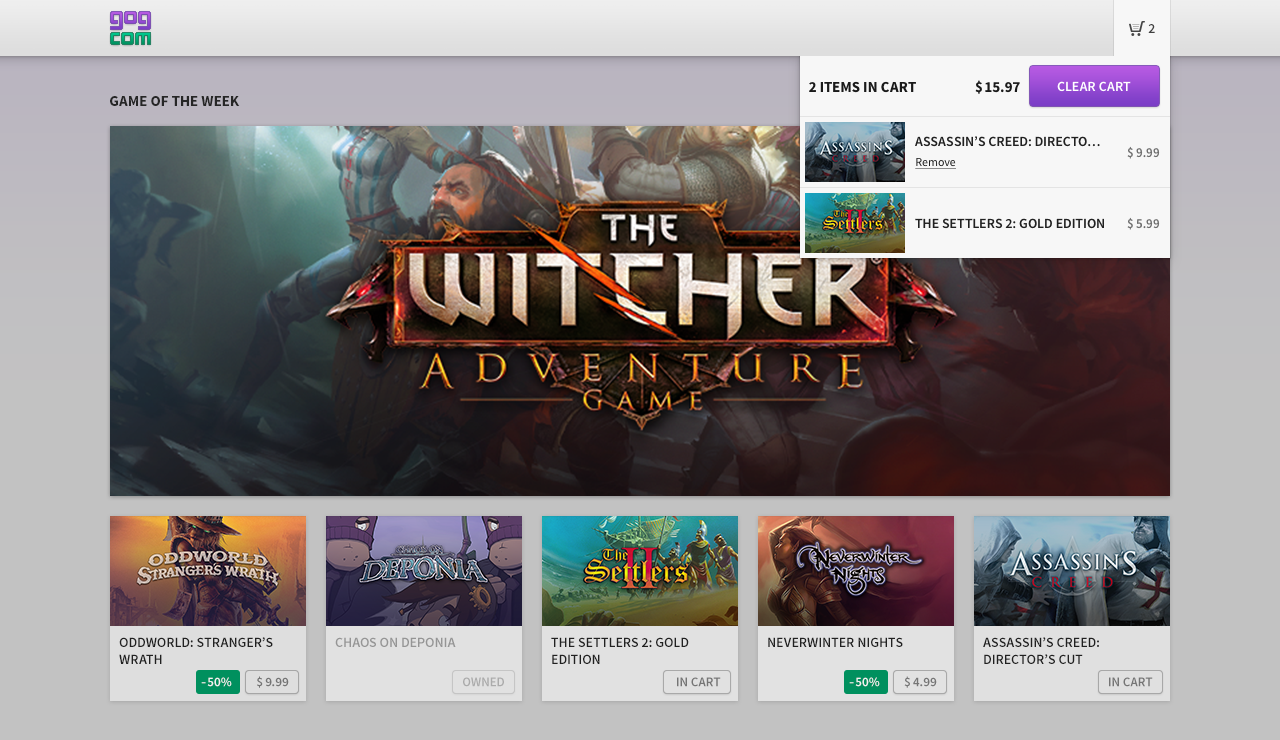
<style>
.page{position:relative;width:1280px;height:740px}
.page>*{position:absolute;margin:0}
.t1{font:14px "SourceSansPro-Semibold";color:#404040}
.t2{font:15px "SourceSansPro-Bold";color:#1a1a1a;text-transform:uppercase}
.t3{font:15px "SourceSansPro-Bold";color:#1a1a1a}
.t4{font:14px "SourceSansPro-Semibold";color:#ffffff;text-transform:uppercase}
.t5{font:15px "SourceSansPro-Bold";color:#262626}
.t6{font:14px "SourceSansPro-Semibold";color:#212121;text-transform:uppercase}
.t7{font:13px "SourceSansPro-Semibold";color:#6e6e6e}
.t8{font:12px "SourceSansPro-Regular";color:#212121;text-decoration:underline}
.t9{font:14px/17px "SourceSansPro-Semibold";color:#212121;text-transform:uppercase}
.t10{font:14px "SourceSansPro-Semibold";color:#959595;text-transform:uppercase}
.t11{font:13px "SourceSansPro-Semibold";color:#f2f2f2}
.t12{font:13px "SourceSansPro-Semibold";color:#f2f2f2;scale:1.25 1}
.t13{font:13px "SourceSansPro-Semibold";color:#747474}
.t14{font:13px "SourceSansPro-Semibold";color:#ababab}
.t15{font:13px "SourceSansPro-Semibold";color:#757575}
</style>
<div class="page">
<p class="t1" style="left:1148px;top:24px;width:7px;height:9px">2</p>
<p class="t2" style="left:809px;top:81px;width:107px;height:12px">2 items in cart</p>
<p class="t3" style="left:975px;top:80px;width:45px;height:14px">$15.97</p>
<p class="t4" style="left:1057px;top:81px;width:74px;height:11px">CLEAR CART</p>
<p class="t5" style="left:110px;top:96px;width:130px;height:10px">GAME OF THE WEEK</p>
<p class="t6" style="left:915px;top:136px;width:185px;height:11px">assassin’s creed: directo…</p>
<p class="t7" style="left:1127px;top:146px;width:33px;height:13px">$9.99</p>
<p class="t8" style="left:915px;top:158px;width:41px;height:11px">Remove</p>
<p class="t6" style="left:915px;top:218px;width:189px;height:11px">The settlers 2: gold edition</p>
<p class="t7" style="left:1127px;top:217px;width:33px;height:13px">$5.99</p>
<p class="t9" style="left:119px;top:637px;width:154px;height:27px">oddworld: stranger’s<br>wrath</p>
<p class="t10" style="left:335px;top:637px;width:121px;height:10px">chaos on deponia</p>
<p class="t9" style="left:551px;top:637px;width:138px;height:27px">The settlers 2: gold <br>edition</p>
<p class="t6" style="left:768px;top:637px;width:135px;height:10px">neverwinter nights</p>
<p class="t9" style="left:983px;top:637px;width:116px;height:27px">assassin’s creed: <br>director’s cut</p>
<p class="t11" style="left:201px;top:677px;width:31px;height:10px"><span class="t12">-</span>50%</p>
<p class="t13" style="left:257px;top:676px;width:32px;height:12px">$9.99</p>
<p class="t14" style="left:463px;top:677px;width:41px;height:10px">OWNED</p>
<p class="t15" style="left:677px;top:677px;width:44px;height:10px">IN CART</p>
<p class="t11" style="left:849px;top:677px;width:31px;height:10px"><span class="t12">-</span>50%</p>
<p class="t15" style="left:904px;top:676px;width:33px;height:12px">$4.99</p>
<p class="t13" style="left:1109px;top:677px;width:44px;height:10px">IN CART</p>
</div>
